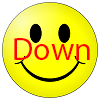
<style>
.page{position:relative;width:100px;height:100px;background:#ffffff}
.page>*{position:absolute;margin:0}
.t1{font:32px "MyriadPro-Regular";color:#ff0000}
</style>
<div class="page">
<p class="t1" style="left:14px;top:38px;width:76px;height:22px">Down</p>
</div>
